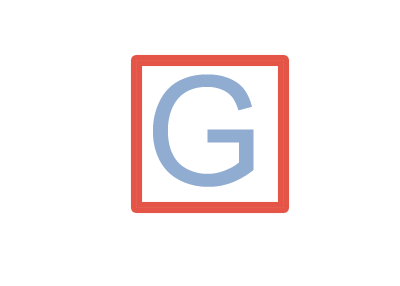
<style>
.page{position:relative;width:400px;height:286px;background:#ffffff}
.page>*{position:absolute;margin:0}
.t1{font:152px "ArialMT";color:#90acd1}
</style>
<div class="page">
<p class="t1" style="left:153px;top:74px;width:101px;height:113px">G</p>
</div>
